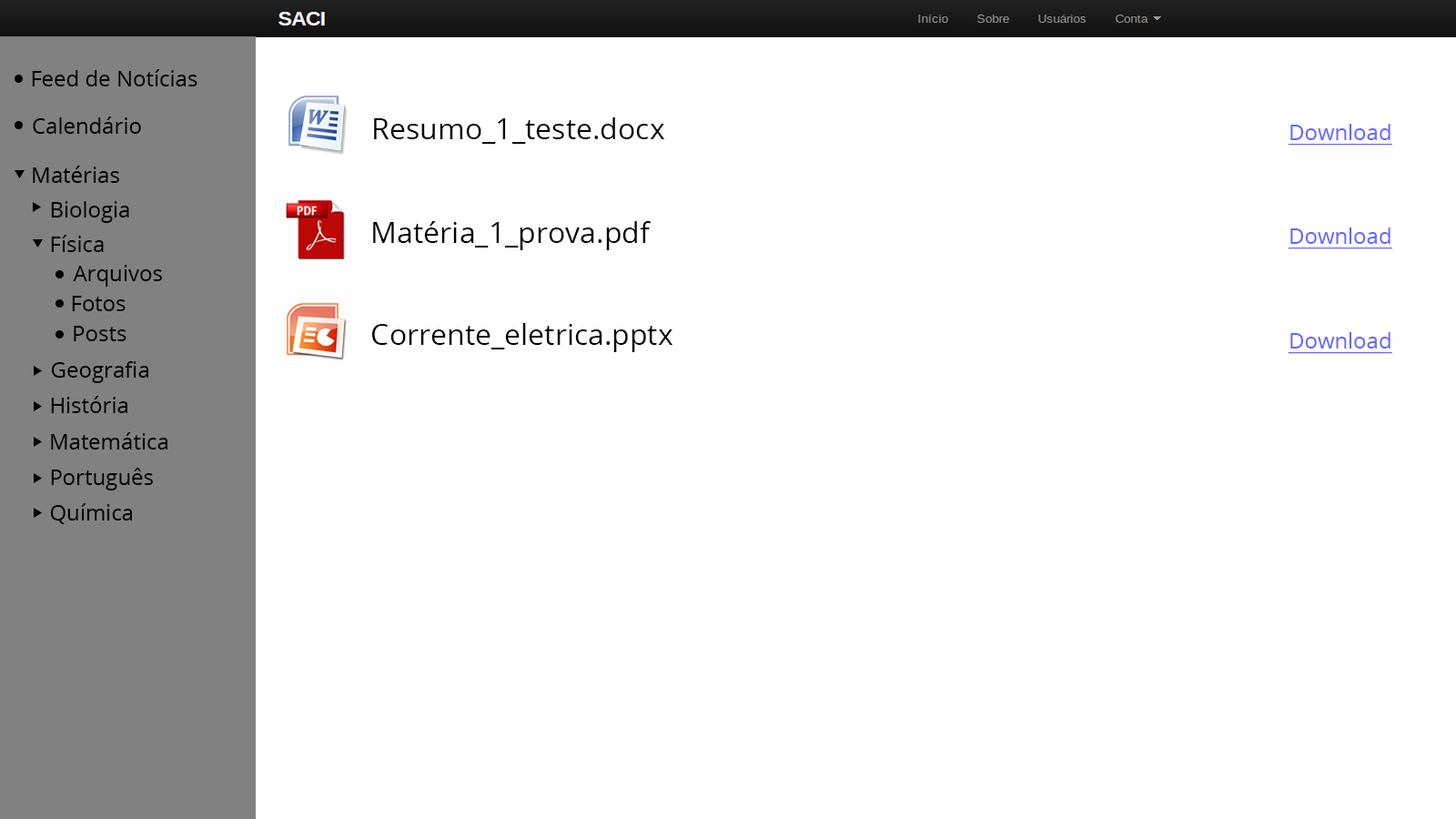
<style>
.page{position:relative;width:1456px;height:819px;background:#ffffff}
.page>*{position:absolute;margin:0}
.t1{font:21.8px "OpenSans";color:#000000}
.t2{font:29.1px "OpenSans";color:#000000}
.t3{font:21.8px "OpenSans";color:#6666ff;text-decoration:underline}
</style>
<div class="page">
<p class="t1" style="left:32px;top:69px;width:165px;height:17px">Feed de Notícias</p>
<p class="t1" style="left:33px;top:116px;width:108px;height:18px">Calendário</p>
<p class="t2" style="left:374px;top:117px;width:290px;height:27px">Resumo_1_teste.docx</p>
<p class="t3" style="left:1288px;top:124px;width:104px;height:22px">Download</p>
<p class="t1" style="left:33px;top:166px;width:86px;height:17px">Matérias</p>
<p class="t1" style="left:51px;top:201px;width:78px;height:22px">Biologia</p>
<p class="t2" style="left:373px;top:221px;width:279px;height:29px">Matéria_1_prova.pdf</p>
<p class="t3" style="left:1288px;top:227px;width:104px;height:22px">Download</p>
<p class="t1" style="left:51px;top:235px;width:53px;height:17px">Física</p>
<p class="t1" style="left:73px;top:265px;width:89px;height:22px">Arquivos</p>
<p class="t1" style="left:72px;top:296px;width:54px;height:15px">Fotos</p>
<p class="t1" style="left:74px;top:326px;width:52px;height:15px">Posts</p>
<p class="t2" style="left:372px;top:323px;width:300px;height:29px">Corrente_eletrica.pptx</p>
<p class="t3" style="left:1288px;top:332px;width:104px;height:22px">Download</p>
<p class="t1" style="left:51px;top:361px;width:97px;height:22px">Geografia</p>
<p class="t1" style="left:51px;top:396px;width:76px;height:17px">História</p>
<p class="t1" style="left:51px;top:432px;width:116px;height:18px">Matemática</p>
<p class="t1" style="left:51px;top:468px;width:102px;height:22px">Português</p>
<p class="t1" style="left:50px;top:503px;width:82px;height:21px">Química</p>
</div>
